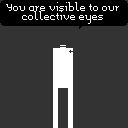
<style>
.page{position:relative;width:128px;height:128px;background:#333333}
.page>*{position:absolute;margin:0}
.t1{font:8px "Memoria";color:#ffffff}
</style>
<div class="page">
<p class="t1" style="left:6px;top:2px;width:113px;height:22px;text-align:center">You are visible to our<br>collective eyes</p>
</div>
